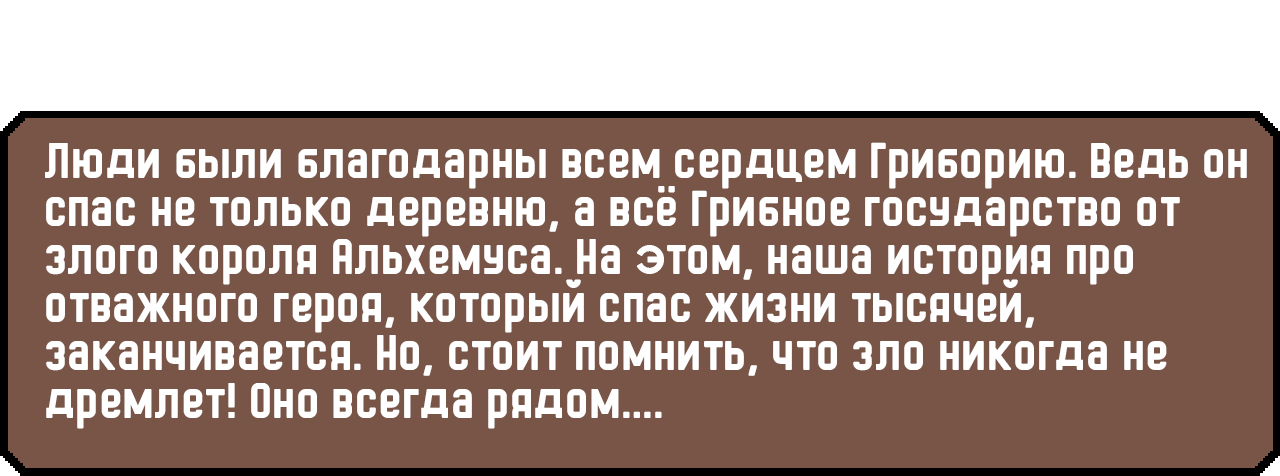
<style>
.page{position:relative;width:1280px;height:476px;background:#795548}
.page>*{position:absolute;margin:0}
.t1{font:48px/48px "HermanoMayor";color:#ffffff}
</style>
<div class="page">
<p class="t1" style="left:45px;top:142px;width:1202px;height:287px">Люди были благодарны всем сердцем Гриборию. Ведь он спас не только деревню, а всё Грибное государство от злого короля Альхемуса. На этом, наша история про отважного героя, который спас жизни тысячей, заканчивается. Но, стоит помнить, что зло никогда не дремлет! Оно всегда рядом….</p>
</div>
